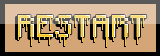
<style>
.page{position:relative;width:160px;height:56px;background:#d4a577}
.page>*{position:absolute;margin:0}
.t1{font:25px "Minecraft1.1"}
</style>
<div class="page">
<p class="t1" style="left:18px;top:15px;width:129px;height:22px">RESTART</p>
</div>
